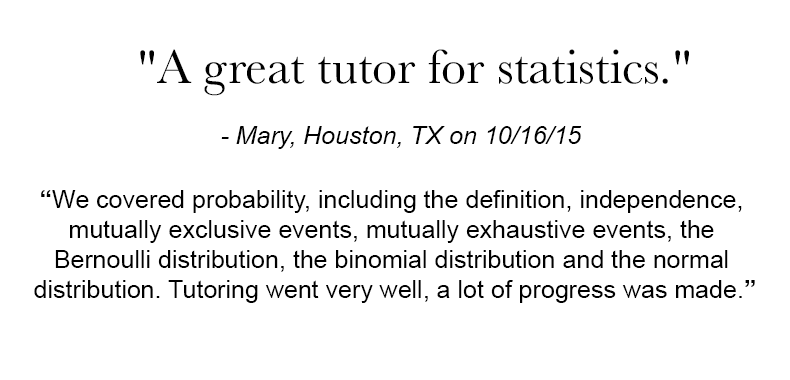
<style>
.page{position:relative;width:790px;height:380px;background:#ffffff}
.page>*{position:absolute;margin:0}
.t1{font:50px "Baskerville";color:#000000}
.t2{font:25px "Arial-ItalicMT";color:#000000}
.t3{font:25px "ArialMT";color:#000000}
.t4{font:25px "Arial-BoldMT";color:#000000}
</style>
<div class="page">
<p class="t1" style="left:140px;top:49px;width:549px;height:47px">"A great tutor for statistics."</p>
<p class="t2" style="left:221px;top:126px;width:361px;height:23px">- Mary, Houston, TX on 10/16/15</p>
<p class="t3" style="left:34px;top:190px;width:721px;height:113px;text-align:center"><span class="t4">“</span>We covered probability, including the definition, independence, <br>mutually exclusive events, mutually exhaustive events, the <br>Bernoulli distribution, the binomial distribution and the normal <br>distribution. Tutoring went very well, a lot of progress was made.<span class="t4">”</span></p>
</div>
